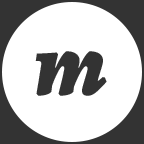
<style>
.page{position:relative;width:144px;height:144px;background:#ffffff}
.page>*{position:absolute;margin:0}
.t1{font:90px "Alegreya-BlackItalic";letter-spacing:-0.076em;color:#333333}
</style>
<div class="page">
<p class="t1" style="left:35px;top:51px;width:72px;height:45px">m</p>
</div>
